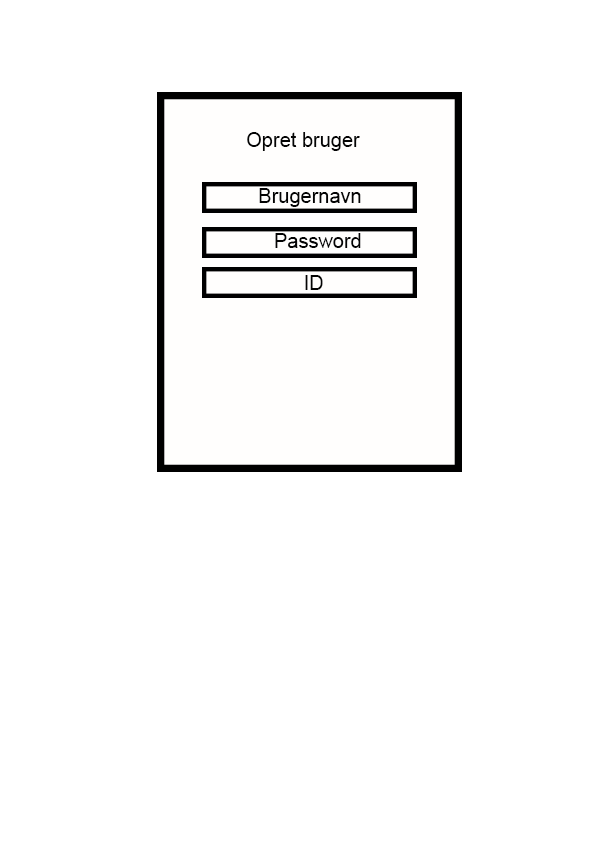
<style>
.page{position:relative;width:595px;height:842px;background:#ffffff}
.page>*{position:absolute;margin:0}
.t1{font:20px "ArialMT";color:#040404}
</style>
<div class="page">
<p class="t1" style="left:247px;top:132px;width:113px;height:19px">Opret bruger</p>
<p class="t1" style="left:259px;top:188px;width:102px;height:19px">Brugernavn</p>
<p class="t1" style="left:275px;top:233px;width:86px;height:15px">Password</p>
<p class="t1" style="left:305px;top:275px;width:18px;height:15px">ID</p>
</div>
